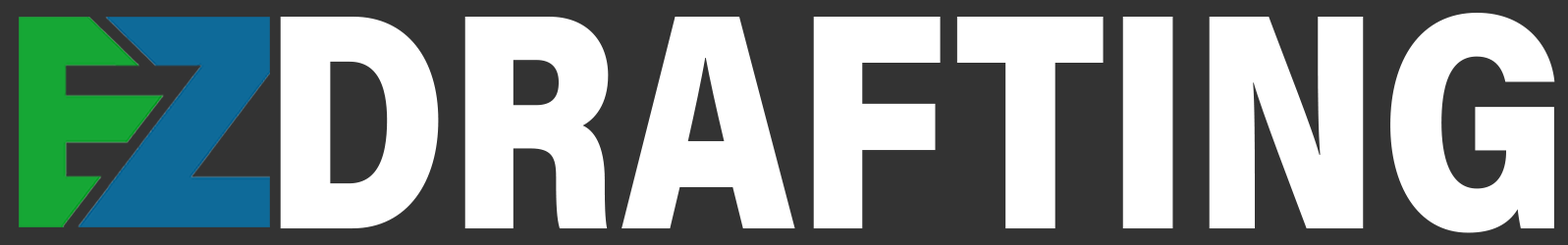
<style>
.page{position:relative;width:1568px;height:245px;background:#333333}
.page>*{position:absolute;margin:0}
.t1{font:307.9px "AcuminConcept-Black";color:#ffffff;scale:0.8 1}
</style>
<div class="page">
<p class="t1" style="left:280px;top:13px;width:1275px;height:221px">DRAFTING</p>
</div>
